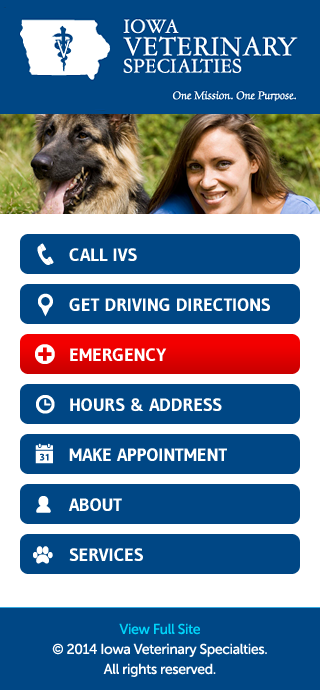
<style>
.page{position:relative;width:320px;height:690px;background:#004785}
.page>*{position:absolute;margin:0}
.t1{font:18px/20px "Gudea-Bold";color:#ffffff;text-transform:uppercase}
.t2{font:14px/20px "MuseoSans-500";letter-spacing:-0.025em;color:#ffffff}
.t3{font:14px/20px "MuseoSans-500";letter-spacing:-0.025em;color:#00d3f9}
</style>
<div class="page">
<p class="t1" style="left:68px;top:248px;width:202px;height:313px">Call IVS<br>Get Driving Directions<br>Emergency<br>Hours &amp; Address<br>Make Appointment<br>About<br>Services</p>
<p class="t2" style="left:52px;top:623px;width:215px;height:54px;text-align:center"><span class="t3">View Full Site<br></span>© 2014 Iowa Veterinary Specialties. <br>All rights reserved.</p>
</div>
